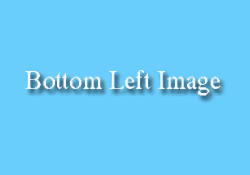
<style>
.page{position:relative;width:250px;height:175px;background:#6acefd}
.page>*{position:absolute;margin:0}
.t1{font:26px "MS Serif";color:#ffffff}
</style>
<div class="page">
<p class="t1" style="left:25px;top:70px;width:196px;height:26px">Bottom Left Image</p>
</div>
